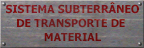
<style>
.page{position:relative;width:144px;height:48px}
.page>*{position:absolute;margin:0}
.t1{font:11px/14px "Tahoma-Bold";letter-spacing:-0.005em;color:#7c0c0c}
</style>
<div class="page">
<p class="t1" style="left:6px;top:2px;width:133px;height:39px;text-align:center">SISTEMA SUBTERRÂNEO<br>DE TRANSPORTE DE <br>MATERIAL</p>
</div>
